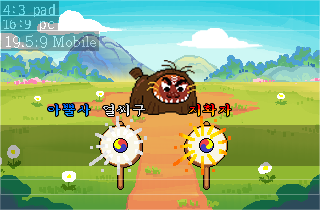
<style>
.page{position:relative;width:320px;height:210px}
.page>*{position:absolute;margin:0}
.t1{font:15px "D2Codingligature";color:#6adce9}
.t2{font:15px "D2Codingligature"}
.t3{font:14px "AdobeMyungjoStd-Medium"}
.t4{font:15px "Sam3KRFont"}
.t5{font:15px "Sam3KRFont";color:#dedede}
</style>
<div class="page">
<p class="t1" style="left:3px;top:4px;width:52px;height:13px">4:3 pad</p>
<p class="t2" style="left:3px;top:19px;width:51px;height:12px">16:9 pc</p>
<p class="t3" style="left:6px;top:35px;width:90px;height:13px">19.5:9 Mobile</p>
<p class="t4" style="left:48px;top:104px;width:42px;height:12px">아뿔사</p>
<p class="t5" style="left:103px;top:104px;width:42px;height:12px">얼씨구</p>
<p class="t4" style="left:189px;top:104px;width:42px;height:12px">지화자</p>
</div>
